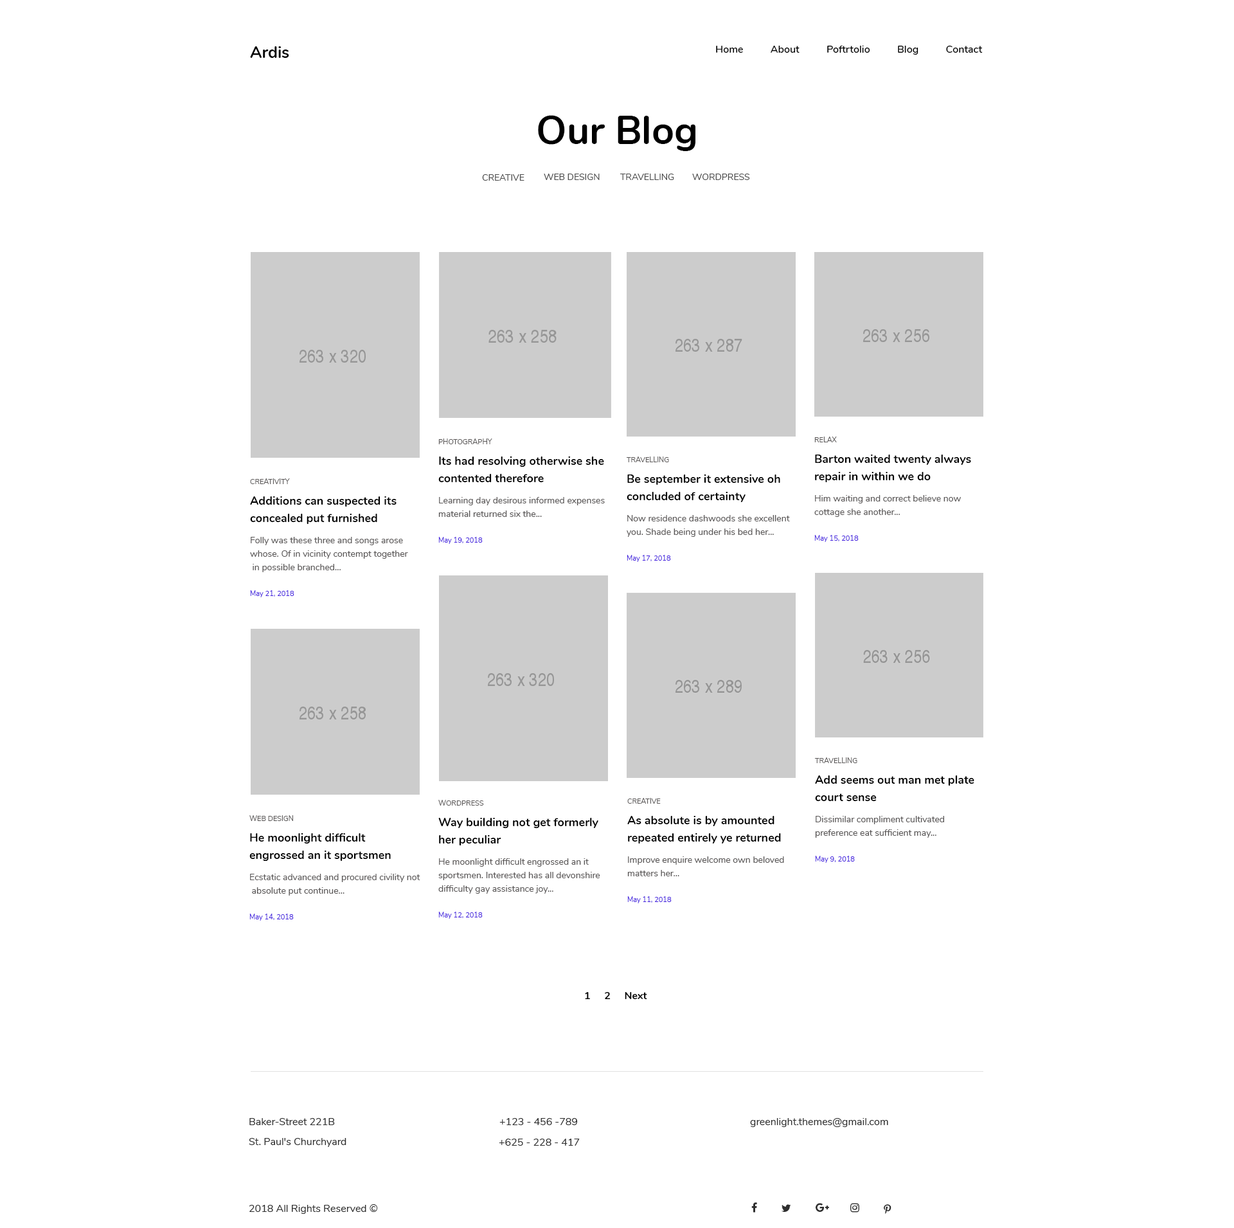
<style>
.page{position:relative;width:1234px;height:1228px;background:#ffffff}
.page>*{position:absolute;margin:0}
.t1{font:16.1px "Nunito-Bold";color:#010101}
.t2{font:10.3px "Nunito-SemiBold";color:#000000}
.t3{font:39.2px "Nunito-Bold";color:#000000}
.t4{font:9px "Nunito-Regular";color:#4b4b4b;text-transform:uppercase}
.t5{font:7.1px "Nunito-Regular";color:#5a5757;text-transform:uppercase}
.t6{font:11.6px/17.4px "Nunito-Bold";color:#000000}
.t7{font:9px/13.5px "Nunito-Regular";color:#5a5757}
.t8{font:7.1px "Nunito-Regular";color:#4724df}
.t9{font:10.3px "Nunito-Bold";color:#000000}
.t10{font:10.3px "Nunito-Regular";color:#2e2e2e}
</style>
<div class="page">
<p class="t1" style="left:250px;top:46px;width:39px;height:12px">Ardis</p>
<p class="t2" style="left:716px;top:46px;width:267px;height:9px">Home          About          Poftrtolio          Blog          Contact</p>
<p class="t3" style="left:538px;top:115px;width:158px;height:36px">Our Blog</p>
<p class="t4" style="left:544px;top:174px;width:56px;height:6px">Web design</p>
<p class="t4" style="left:620px;top:174px;width:54px;height:6px">travelling</p>
<p class="t4" style="left:692px;top:174px;width:58px;height:6px">wordpress</p>
<p class="t4" style="left:482px;top:174px;width:43px;height:7px">Creative</p>
<p class="t5" style="left:815px;top:437px;width:22px;height:5px">relax</p>
<p class="t5" style="left:438px;top:438px;width:54px;height:6px">Photography</p>
<p class="t6" style="left:438px;top:456px;width:166px;height:26px">Its had resolving otherwise she<br>contented therefore</p>
<p class="t5" style="left:626px;top:456px;width:43px;height:6px">Travelling</p>
<p class="t6" style="left:815px;top:455px;width:156px;height:27px">Barton waited twenty always <br>repair in within we do</p>
<p class="t5" style="left:250px;top:478px;width:40px;height:6px">Creativity</p>
<p class="t6" style="left:627px;top:474px;width:153px;height:28px">Be september it extensive oh <br>concluded of certainty</p>
<p class="t6" style="left:250px;top:496px;width:147px;height:28px">Additions can suspected its <br>concealed put furnished</p>
<p class="t7" style="left:438px;top:497px;width:167px;height:20px">Learning day desirous informed expenses <br>material returned six the...</p>
<p class="t7" style="left:815px;top:495px;width:146px;height:22px">Him waiting and correct believe now <br>cottage she another...</p>
<p class="t7" style="left:627px;top:515px;width:163px;height:22px">Now residence dashwoods she excellent<br>you. Shade being under his bed her...</p>
<p class="t7" style="left:250px;top:537px;width:158px;height:35px">Folly was these three and songs arose <br>whose. Of in vicinity contempt together<br> in possible branched...</p>
<p class="t8" style="left:438px;top:537px;width:45px;height:7px">May 19, 2018</p>
<p class="t8" style="left:815px;top:535px;width:44px;height:7px">May 15, 2018</p>
<p class="t8" style="left:627px;top:555px;width:44px;height:7px">May 17, 2018</p>
<p class="t8" style="left:250px;top:590px;width:44px;height:7px">May 21, 2018</p>
<p class="t5" style="left:815px;top:757px;width:43px;height:6px">travelling</p>
<p class="t6" style="left:815px;top:775px;width:160px;height:26px">Add seems out man met plate <br>court sense</p>
<p class="t5" style="left:627px;top:798px;width:34px;height:6px">creative</p>
<p class="t5" style="left:438px;top:800px;width:46px;height:6px">wordpress</p>
<p class="t5" style="left:249px;top:815px;width:44px;height:6px">web design</p>
<p class="t6" style="left:438px;top:818px;width:160px;height:27px">Way building not get formerly <br>her peculiar</p>
<p class="t6" style="left:627px;top:816px;width:154px;height:27px">As absolute is by amounted <br>repeated entirely ye returned</p>
<p class="t7" style="left:815px;top:816px;width:129px;height:22px">Dissimilar compliment cultivated <br>preference eat sufficient may...</p>
<p class="t6" style="left:249px;top:833px;width:142px;height:28px">He moonlight difficult <br>engrossed an it sportsmen</p>
<p class="t7" style="left:627px;top:856px;width:157px;height:20px">Improve enquire welcome own beloved <br>matters her...</p>
<p class="t8" style="left:815px;top:856px;width:40px;height:7px">May 9, 2018</p>
<p class="t7" style="left:438px;top:858px;width:162px;height:36px">He moonlight difficult engrossed an it <br>sportsmen. Interested has all devonshire <br>difficulty gay assistance joy...</p>
<p class="t7" style="left:250px;top:874px;width:170px;height:22px">Ecstatic advanced and procured civility not<br> absolute put continue...</p>
<p class="t8" style="left:627px;top:896px;width:45px;height:7px">May 11, 2018</p>
<p class="t8" style="left:249px;top:914px;width:45px;height:7px">May 14, 2018</p>
<p class="t8" style="left:438px;top:912px;width:45px;height:7px">May 12, 2018</p>
<p class="t9" style="left:585px;top:992px;width:62px;height:7px">1     2     Next</p>
<p class="t10" style="left:249px;top:1118px;width:86px;height:7px">Baker-Street 221B</p>
<p class="t10" style="left:500px;top:1118px;width:78px;height:7px">+123 - 456 -789</p>
<p class="t10" style="left:750px;top:1118px;width:138px;height:9px">greenlight.themes@gmail.com</p>
<p class="t10" style="left:249px;top:1138px;width:97px;height:9px">St. Paul's Churchyard</p>
<p class="t10" style="left:499px;top:1138px;width:81px;height:8px">+625 - 228 - 417</p>
<p class="t10" style="left:249px;top:1204px;width:129px;height:10px">2018 All Rights Reserved ©</p>
</div>
